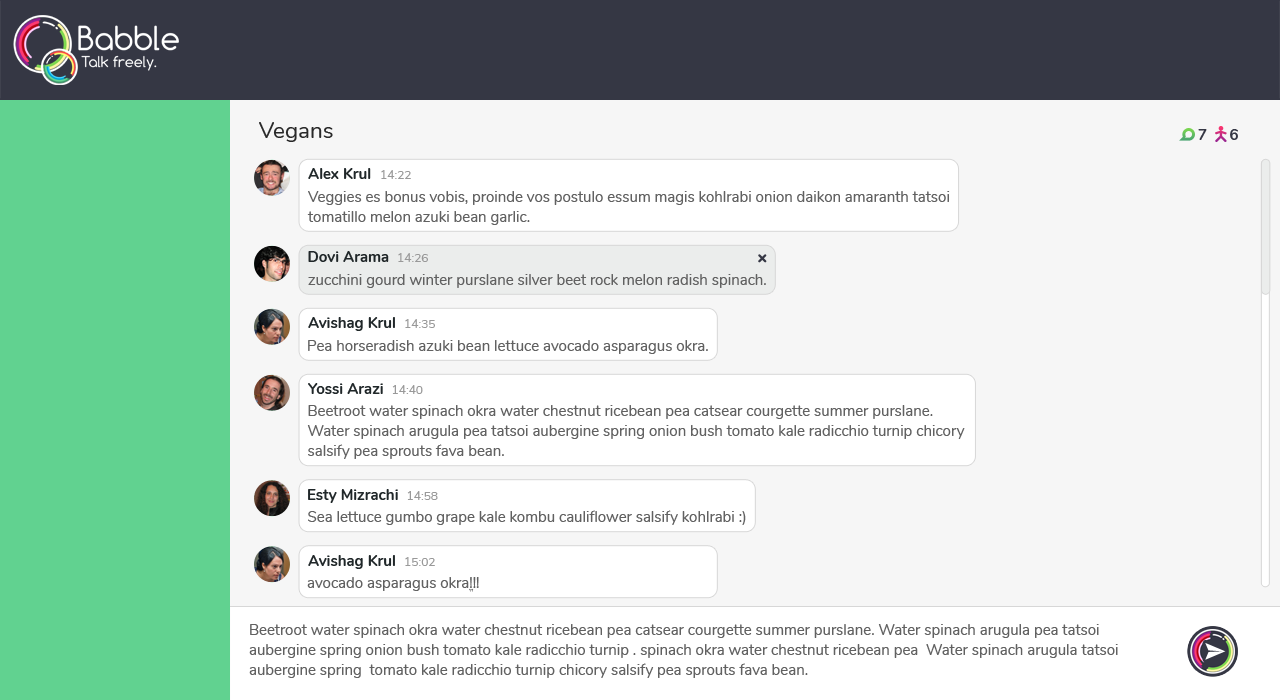
<style>
.page{position:relative;width:1280px;height:700px;background:#f6f6f6}
.page>*{position:absolute;margin:0}
.t1{font:22.5px "Nunito-Regular";color:#292929}
.t2{font:15px "Nunito-Bold";color:#353744}
.t3{font:15px "Nunito-Bold";color:#202729}
.t4{font:12px "Nunito-Regular";color:#999999}
.t5{font:15px/20px "Nunito-Regular";color:#616161}
.t6{font:15px "Nunito-Regular";color:#616161}
</style>
<div class="page">
<p class="t1" style="left:259px;top:122px;width:74px;height:20px">Vegans</p>
<p class="t2" style="left:1198px;top:129px;width:9px;height:11px">7</p>
<p class="t2" style="left:1230px;top:129px;width:8px;height:11px">6</p>
<p class="t3" style="left:308px;top:168px;width:63px;height:11px">Alex Krul</p>
<p class="t4" style="left:381px;top:170px;width:30px;height:9px">14:22</p>
<p class="t5" style="left:307px;top:191px;width:643px;height:34px">Veggies es bonus vobis, proinde vos postulo essum magis kohlrabi onion daikon amaranth tatsoi <br>tomatillo melon azuki bean garlic.</p>
<p class="t3" style="left:308px;top:251px;width:81px;height:11px">Dovi Arama</p>
<p class="t4" style="left:398px;top:253px;width:30px;height:9px">14:26</p>
<p class="t6" style="left:308px;top:274px;width:458px;height:14px">zucchini gourd winter purslane silver beet rock melon radish spinach.</p>
<p class="t3" style="left:308px;top:317px;width:87px;height:14px">Avishag Krul</p>
<p class="t4" style="left:405px;top:319px;width:30px;height:9px">14:35</p>
<p class="t6" style="left:308px;top:340px;width:400px;height:14px">Pea horseradish azuki bean lettuce avocado asparagus okra.</p>
<p class="t3" style="left:308px;top:383px;width:75px;height:11px">Yossi Arazi</p>
<p class="t4" style="left:392px;top:385px;width:31px;height:9px">14:40</p>
<p class="t5" style="left:307px;top:405px;width:658px;height:54px">Beetroot water spinach okra water chestnut ricebean pea catsear courgette summer purslane. <br>Water spinach arugula pea tatsoi aubergine spring onion bush tomato kale radicchio turnip chicory <br>salsify pea sprouts fava bean.</p>
<p class="t3" style="left:308px;top:489px;width:90px;height:14px">Esty Mizrachi</p>
<p class="t4" style="left:407px;top:491px;width:31px;height:9px">14:58</p>
<p class="t6" style="left:308px;top:510px;width:438px;height:15px">Sea lettuce gumbo grape kale kombu cauliflower salsify kohlrabi :)</p>
<p class="t3" style="left:308px;top:555px;width:87px;height:14px">Avishag Krul</p>
<p class="t4" style="left:405px;top:557px;width:30px;height:9px">15:02</p>
<p class="t6" style="left:307px;top:577px;width:172px;height:15px">avocado asparagus okraֱֱֱֱֱ!!!</p>
<p class="t5" style="left:249px;top:624px;width:869px;height:54px">Beetroot water spinach okra water chestnut ricebean pea catsear courgette summer purslane. Water spinach arugula pea tatsoi <br>aubergine spring onion bush tomato kale radicchio turnip . spinach okra water chestnut ricebean pea  Water spinach arugula tatsoi <br>aubergine spring  tomato kale radicchio turnip chicory salsify pea sprouts fava bean.</p>
</div>
